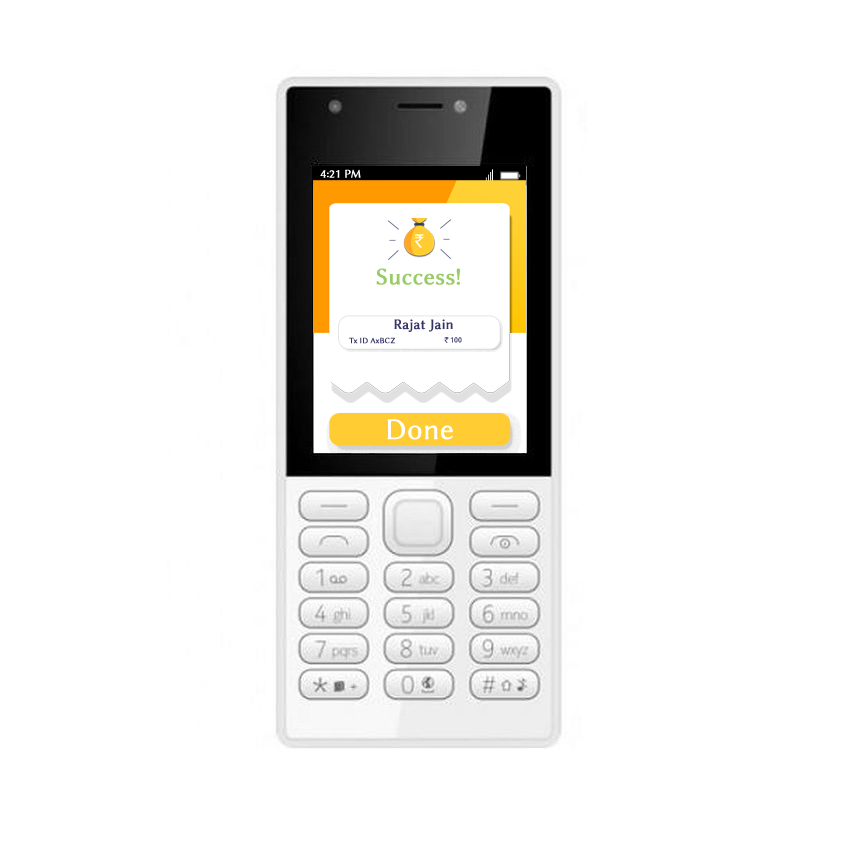
<style>
.page{position:relative;width:850px;height:850px;background:#ffffff}
.page>*{position:absolute;margin:0}
.t1{font:12px "LinuxBiolinumG";color:#ffffff;font-weight:bold}
.t2{font:24px "LinuxBiolinumG";color:#99cc66;font-weight:bold}
.t3{font:14px "LinuxBiolinumG";color:#333366;font-weight:bold}
.t4{font:8px "LinuxBiolinumG";color:#333366;font-weight:bold}
.t5{font:8px "LinuxBiolinumG";font-weight:bold}
.t6{font:30px "LinuxBiolinumG";color:#ffffff;font-weight:bold}
</style>
<div class="page">
<p class="t1" style="left:320px;top:169px;width:41px;height:9px">4:21 PM</p>
<p class="t2" style="left:376px;top:268px;width:84px;height:17px">Success!</p>
<p class="t3" style="left:394px;top:319px;width:59px;height:13px">Rajat Jain</p>
<p class="t4" style="left:349px;top:337px;width:46px;height:7px">Tx ID AxBCZ</p>
<p class="t5" style="left:450px;top:337px;width:12px;height:6px">100</p>
<p class="t6" style="left:387px;top:419px;width:66px;height:21px">Done</p>
</div>
